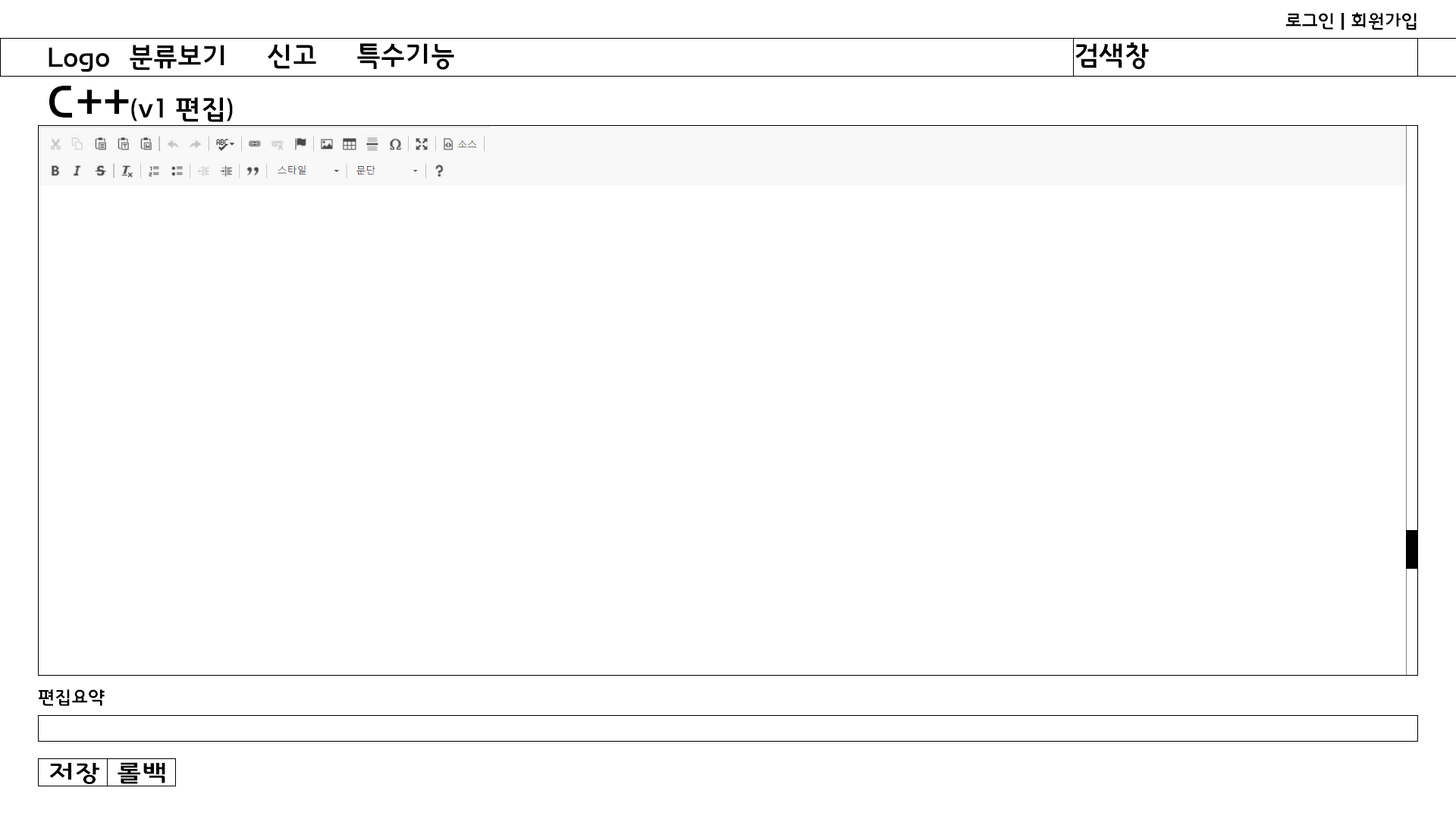
<style>
.page{position:relative;width:1456px;height:819px;background:#ffffff}
.page>*{position:absolute;margin:0}
.t1{font:18.2px "InterGTB";color:#000000}
.t2{font:27.3px "InterGTB";color:#000000}
.t3{font:45.5px "InterGTB";color:#000000}
.t4{font:22.7px "InterGTB";color:#000000;scale:1.21 1}
</style>
<div class="page">
<p class="t1" style="left:1285px;top:12px;width:132px;height:18px">로그인 | 회원가입</p>
<p class="t2" style="left:49px;top:47px;width:60px;height:25px">Logo</p>
<p class="t2" style="left:130px;top:45px;width:94px;height:26px">분류보기</p>
<p class="t2" style="left:268px;top:44px;width:48px;height:25px">신고</p>
<p class="t2" style="left:357px;top:43px;width:97px;height:27px">특수기능</p>
<p class="t2" style="left:1075px;top:42px;width:74px;height:28px">검색창</p>
<p class="t2" style="left:49px;top:86px;width:184px;height:36px"><span class="t3">C++</span>(v1 편집)</p>
<p class="t1" style="left:39px;top:689px;width:66px;height:17px">편집요약</p>
<p class="t4" style="left:49px;top:763px;width:50px;height:21px">저장</p>
<p class="t4" style="left:118px;top:762px;width:47px;height:22px">롤백</p>
</div>
